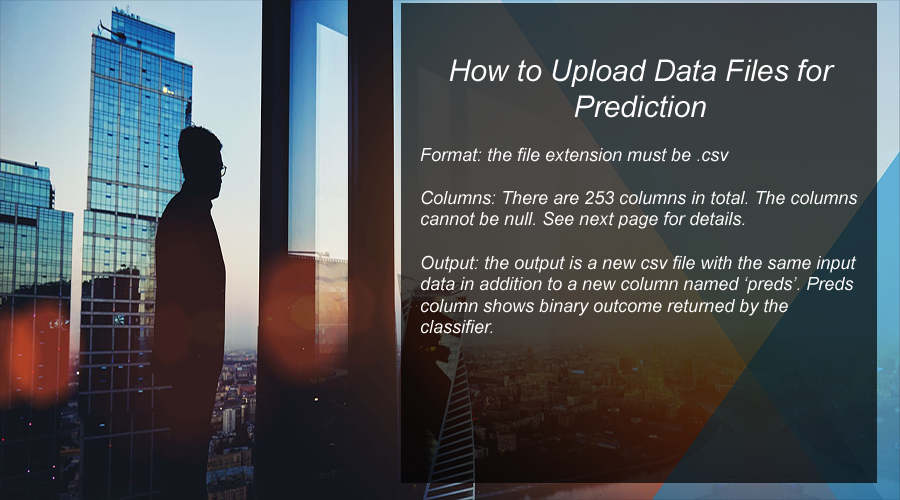
<style>
.page{position:relative;width:900px;height:500px}
.page>*{position:absolute;margin:0}
.t1{font:18px "Arial-ItalicMT";color:#fffdfd}
.t2{font:30px "Arial-ItalicMT";color:#fffdfd}
</style>
<div class="page">
<p class="t1" style="left:420px;top:59px;width:438px;height:275px;text-align:center"><span class="t2"><br>How to Upload Data Files for Prediction<br></span><br>Format: the file extension must be .csv<br><br>Columns: There are 253 columns in total. The columns cannot be null. See next page for details.<br><br>Output: the output is a new csv file with the same input data in addition to a new column named ‘preds’. Preds column shows binary outcome returned by the <br>classifier.</p>
</div>
